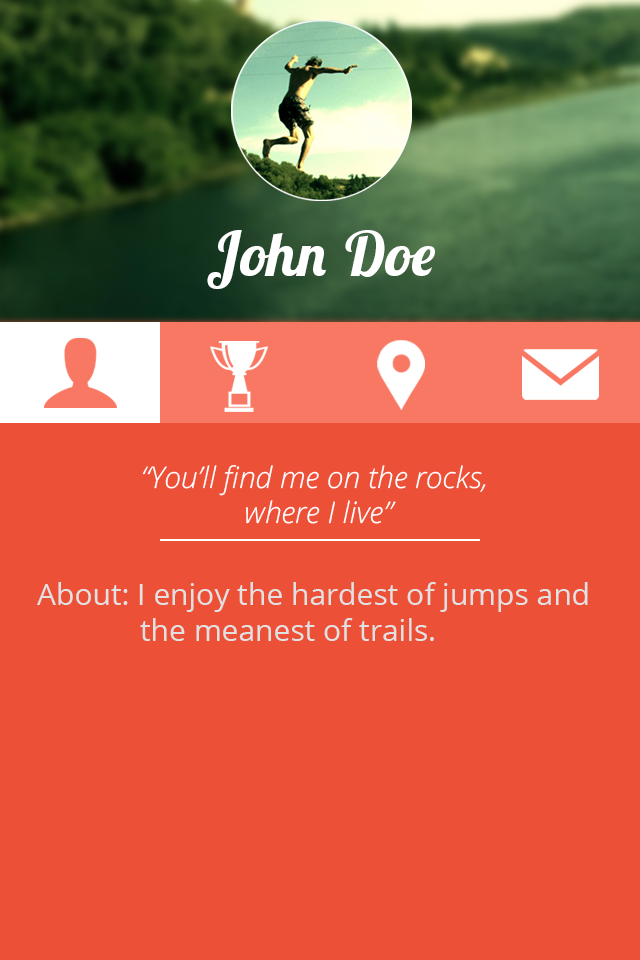
<style>
.page{position:relative;width:640px;height:960px;background:#ec5036}
.page>*{position:absolute;margin:0}
.t1{font:60.9px "LobsterTwo-BoldItalic";color:#ffffff}
.t2{font:29.8px "OpenSansLight-Italic";color:#ffffff}
.t3{font:30px "OpenSans";color:#e1e1e1}
</style>
<div class="page">
<p class="t1" style="left:207px;top:230px;width:228px;height:59px">John Doe</p>
<p class="t2" style="left:142px;top:465px;width:344px;height:59px;text-align:center">“You’ll find me on the rocks, <br>where I live”</p>
<p class="t3" style="left:37px;top:582px;width:551px;height:59px">About: I enjoy the hardest of jumps and <br>      the meanest of trails.</p>
</div>
